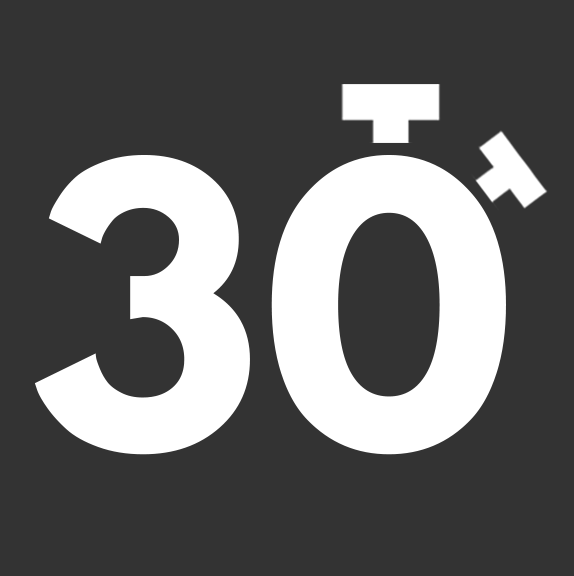
<style>
.page{position:relative;width:574px;height:576px;background:#333333}
.page>*{position:absolute;margin:0}
.t1{font:349.6px "LeagueSpartan-Bold";color:#ffffff}
</style>
<div class="page">
<p class="t1" style="left:34px;top:155px;width:472px;height:300px">30</p>
</div>
